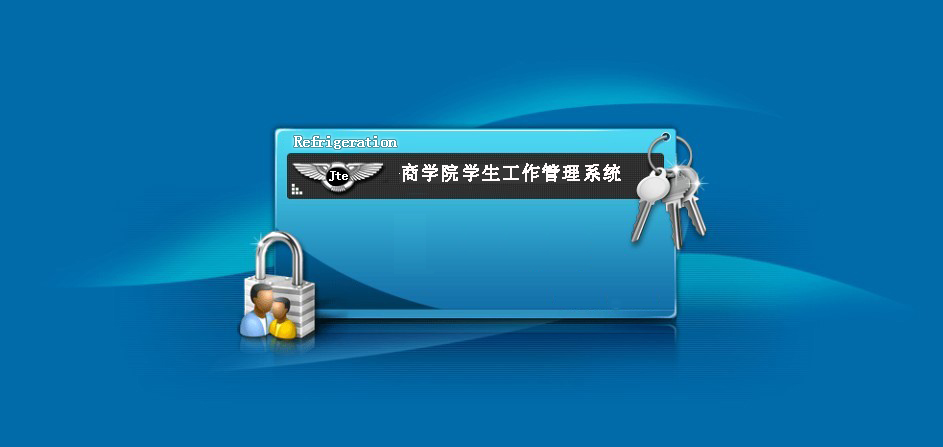
<style>
.page{position:relative;width:943px;height:447px;background:#016ba9}
.page>*{position:absolute;margin:0}
.t1{font:18.7px "SimSun";letter-spacing:0.01em;color:#fffbfb;font-weight:bold}
</style>
<div class="page">
<p class="t1" style="left:402px;top:163px;width:219px;height:19px">商学院学生工作管理系统</p>
</div>
